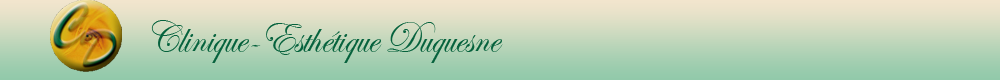
<style>
.page{position:relative;width:1000px;height:80px}
.page>*{position:absolute;margin:0}
.t1{font:45.4px "EdwardianScriptITC";color:#06623d;scale:0.88 1}
</style>
<div class="page">
<p class="t1" style="left:151px;top:20px;width:352px;height:43px">Clinique-Esthétique Duquesne</p>
</div>
